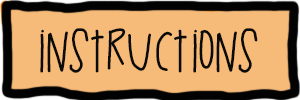
<style>
.page{position:relative;width:300px;height:100px;background:#f6ba79}
.page>*{position:absolute;margin:0}
.t1{font:60px "BlackTinBox";color:#0b0b0a}
</style>
<div class="page">
<p class="t1" style="left:40px;top:28px;width:218px;height:45px">Instructions</p>
</div>
